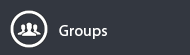
<style>
.page{position:relative;width:190px;height:55px;background:#333740}
.page>*{position:absolute;margin:0}
.t1{font:16px "MyriadPro-Regular";color:#ffffff}
</style>
<div class="page">
<p class="t1" style="left:59px;top:25px;width:48px;height:14px">Groups</p>
</div>
